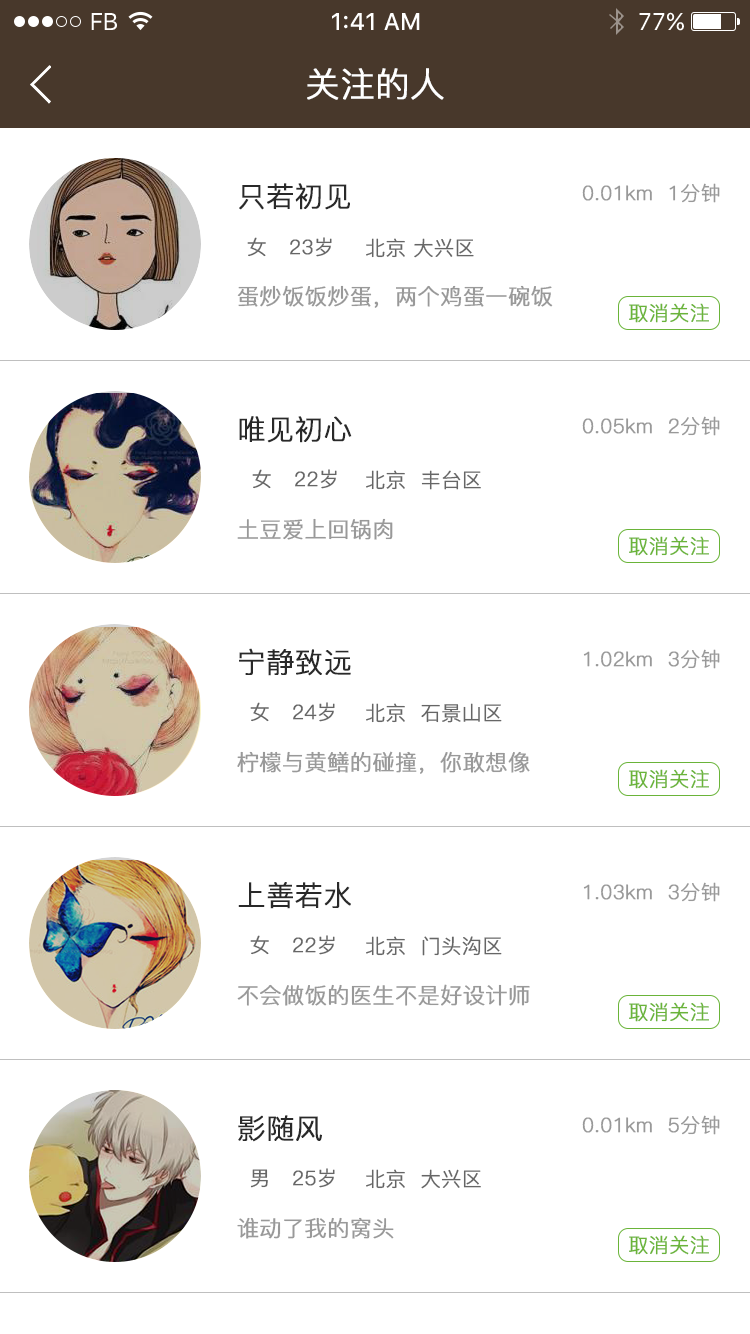
<style>
.page{position:relative;width:750px;height:1334px;background:#ffffff}
.page>*{position:absolute;margin:0}
.t1{font:24px "SFUIText-Regular";letter-spacing:-0.025em;color:#ffffff}
.t2{font:24px "SFUIText-Medium";color:#ffffff}
.t3{font:24px "SFUIText-Regular";color:#ffffff}
.t4{font:34px "PingFang-SC-Regular";color:#fffefe;font-weight:bold}
.t5{font:28px "PingFang-SC-Regular";color:#292929;font-weight:bold}
.t6{font:20px "PingFang-SC-Regular";color:#999999;font-weight:bold}
.t7{font:20px "PingFang-SC-Regular";color:#666666;font-weight:bold}
.t8{font:22px "PingFang-SC-Regular";color:#999999;font-weight:bold}
.t9{font:20px "PingFang-SC-Regular";color:#6ab439;font-weight:bold}
</style>
<div class="page">
<p class="t1" style="left:91px;top:13px;width:26px;height:17px">FB</p>
<p class="t2" style="left:332px;top:13px;width:88px;height:17px">1:41 AM</p>
<p class="t3" style="left:639px;top:12px;width:45px;height:19px">77%</p>
<p class="t4" style="left:307px;top:68px;width:137px;height:32px">关注的人</p>
<p class="t5" style="left:239px;top:183px;width:111px;height:27px">只若初见</p>
<p class="t6" style="left:582px;top:183px;width:138px;height:20px">0.01km  1分钟</p>
<p class="t7" style="left:247px;top:237px;width:85px;height:20px">女   23岁</p>
<p class="t7" style="left:366px;top:238px;width:108px;height:20px">北京 大兴区</p>
<p class="t8" style="left:237px;top:285px;width:316px;height:23px">蛋炒饭饭炒蛋，两个鸡蛋一碗饭</p>
<p class="t9" style="left:629px;top:303px;width:80px;height:20px">取消关注</p>
<p class="t5" style="left:239px;top:416px;width:113px;height:27px">唯见初心</p>
<p class="t6" style="left:582px;top:416px;width:138px;height:20px">0.05km  2分钟</p>
<p class="t7" style="left:252px;top:469px;width:85px;height:20px">女   22岁</p>
<p class="t7" style="left:366px;top:470px;width:115px;height:20px">北京  丰台区</p>
<p class="t8" style="left:237px;top:518px;width:156px;height:22px">土豆爱上回锅肉</p>
<p class="t9" style="left:629px;top:536px;width:80px;height:20px">取消关注</p>
<p class="t5" style="left:239px;top:648px;width:112px;height:28px">宁静致远</p>
<p class="t6" style="left:583px;top:649px;width:137px;height:20px">1.02km  3分钟</p>
<p class="t7" style="left:250px;top:702px;width:85px;height:20px">女   24岁</p>
<p class="t7" style="left:366px;top:703px;width:136px;height:20px">北京  石景山区</p>
<p class="t8" style="left:237px;top:751px;width:293px;height:23px">柠檬与黄鳝的碰撞，你敢想像</p>
<p class="t9" style="left:629px;top:769px;width:80px;height:20px">取消关注</p>
<p class="t5" style="left:238px;top:882px;width:113px;height:27px">上善若水</p>
<p class="t6" style="left:583px;top:882px;width:137px;height:20px">1.03km  3分钟</p>
<p class="t7" style="left:250px;top:935px;width:85px;height:20px">女   22岁</p>
<p class="t7" style="left:366px;top:936px;width:136px;height:20px">北京  门头沟区</p>
<p class="t8" style="left:237px;top:984px;width:293px;height:22px">不会做饭的医生不是好设计师</p>
<p class="t9" style="left:629px;top:1002px;width:80px;height:20px">取消关注</p>
<p class="t5" style="left:238px;top:1115px;width:84px;height:27px">影随风</p>
<p class="t6" style="left:582px;top:1115px;width:138px;height:20px">0.01km  5分钟</p>
<p class="t7" style="left:250px;top:1168px;width:85px;height:20px">男   25岁</p>
<p class="t7" style="left:366px;top:1169px;width:115px;height:20px">北京  大兴区</p>
<p class="t8" style="left:237px;top:1217px;width:157px;height:22px">谁动了我的窝头</p>
<p class="t9" style="left:629px;top:1235px;width:80px;height:20px">取消关注</p>
</div>
